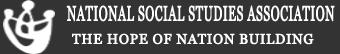
<style>
.page{position:relative;width:340px;height:54px;background:#333333}
.page>*{position:absolute;margin:0}
.t1{font:20.9px "Georgia";letter-spacing:0.025em;color:#fefefe;font-weight:bold;scale:0.57 1}
.t2{font:13.9px "Georgia";letter-spacing:0.025em;color:#ffffff;font-weight:bold}
</style>
<div class="page">
<p class="t1" style="left:66px;top:5px;width:269px;height:17px">NATIONAL SOCIAL STUDIES ASSOCIATION</p>
<p class="t2" style="left:72px;top:33px;width:242px;height:12px">THE HOPE OF NATION BUILDING</p>
</div>
